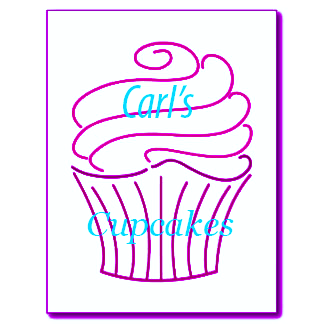
<style>
.page{position:relative;width:324px;height:324px;background:#fdffff}
.page>*{position:absolute;margin:0}
.t1{font:48px "MyriadPro-CondIt";color:#03eaff}
.t2{font:34.7px "Georgia-Italic";color:#02eaff}
</style>
<div class="page">
<p class="t1" style="left:123px;top:85px;width:71px;height:33px">Carl’s</p>
<p class="t2" style="left:87px;top:210px;width:147px;height:34px">Cupcakes</p>
</div>
